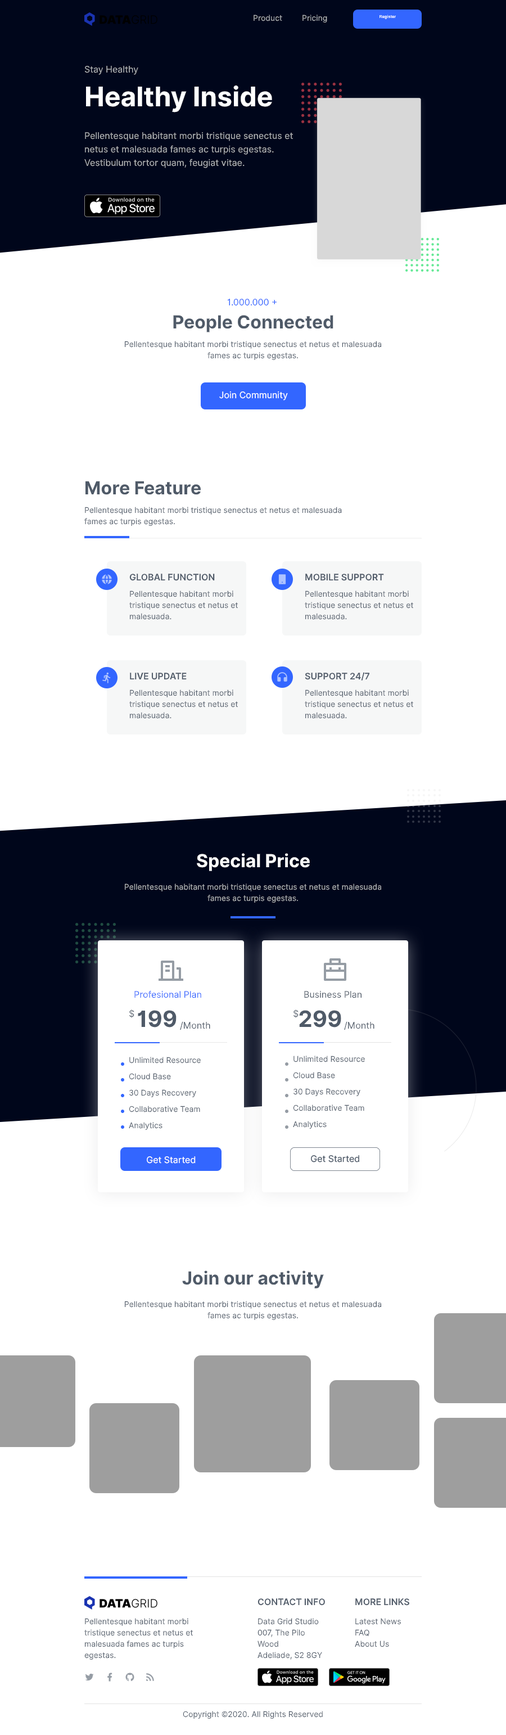
<style>
.page{position:relative;width:506px;height:1735px;background:#ffffff}
.page>*{position:absolute;margin:0}
.t1{font:7.9px "Inter-Regular";color:#b8b9bb}
.t2{font:4.2px "Arial-BoldMT";color:#ffffff}
.t3{font:9px "Inter-Regular";color:#b8b9bb}
.t4{font:27px "Inter-Bold";color:#ffffff}
.t5{font:9px/13.5px "Inter-Regular";color:#b8b9bb}
.t6{font:9px "Inter-Regular";color:#3366ff}
.t7{font:18px "Inter-Bold";color:#4f5a68}
.t8{font:7.9px/11.2px "Inter-Regular";color:#4f5a68}
.t9{font:9px "Inter-Regular";color:#ffffff}
.t10{font:9px "Inter-SemiBold";color:#4f5a68;text-transform:uppercase}
.t11{font:18px "Inter-Bold";color:#ffffff}
.t12{font:7.9px/11.2px "Inter-Regular";color:#b8b9bb}
.t13{font:9px "Inter-Regular";color:#4f5a68}
.t14{font:22.5px "Inter-Bold";color:#4f5a68}
.t15{font:7.9px/16.3px "Inter-Regular";color:#4f5a68}
.t16{font:7.9px "Inter-Regular";color:#4f5a68}
</style>
<div class="page">
<p class="t1" style="left:254px;top:15px;width:28px;height:6px">Product</p>
<p class="t1" style="left:303px;top:15px;width:24px;height:8px">Pricing</p>
<p class="t2" style="left:379px;top:15px;width:17px;height:4px">Register</p>
<p class="t3" style="left:84px;top:66px;width:54px;height:9px">Stay Healthy</p>
<p class="t4" style="left:86px;top:86px;width:186px;height:26px">Healthy Inside</p>
<p class="t5" style="left:84px;top:132px;width:209px;height:36px">Pellentesque habitant morbi tristique senectus et netus et malesuada fames ac turpis egestas. Vestibulum tortor quam, feugiat vitae.</p>
<p class="t6" style="left:227px;top:299px;width:50px;height:7px">1.000.000 +</p>
<p class="t7" style="left:173px;top:315px;width:161px;height:17px">People Connected</p>
<p class="t8" style="left:125px;top:341px;width:257px;height:20px;text-align:center">Pellentesque habitant morbi tristique senectus et netus et malesuada fames ac turpis egestas.</p>
<p class="t9" style="left:219px;top:391px;width:69px;height:9px">Join Community</p>
<p class="t7" style="left:86px;top:481px;width:115px;height:14px">More Feature</p>
<p class="t8" style="left:84px;top:507px;width:258px;height:19px">Pellentesque habitant morbi tristique senectus et netus et malesuada fames ac turpis egestas.</p>
<p class="t10" style="left:129px;top:574px;width:86px;height:7px">Global Function</p>
<p class="t10" style="left:305px;top:574px;width:79px;height:7px">Mobile Support</p>
<p class="t8" style="left:129px;top:591px;width:109px;height:29px">Pellentesque habitant morbi tristique senectus et netus et malesuada.</p>
<p class="t8" style="left:305px;top:591px;width:108px;height:29px">Pellentesque habitant morbi tristique senectus et netus et malesuada.</p>
<p class="t10" style="left:130px;top:673px;width:57px;height:7px">Live Update</p>
<p class="t10" style="left:305px;top:672px;width:65px;height:9px">Support 24/7</p>
<p class="t8" style="left:129px;top:690px;width:109px;height:29px">Pellentesque habitant morbi tristique senectus et netus et malesuada.</p>
<p class="t8" style="left:305px;top:690px;width:108px;height:29px">Pellentesque habitant morbi tristique senectus et netus et malesuada.</p>
<p class="t11" style="left:197px;top:853px;width:113px;height:18px">Special Price</p>
<p class="t12" style="left:125px;top:884px;width:257px;height:19px;text-align:center">Pellentesque habitant morbi tristique senectus et netus et malesuada fames ac turpis egestas.</p>
<p class="t6" style="left:134px;top:991px;width:67px;height:7px">Profesional Plan</p>
<p class="t13" style="left:304px;top:991px;width:58px;height:7px">Business Plan</p>
<p class="t13" style="left:129px;top:1009px;width:5px;height:9px">$</p>
<p class="t14" style="left:138px;top:1010px;width:39px;height:18px">199</p>
<p class="t13" style="left:293px;top:1009px;width:6px;height:9px">$</p>
<p class="t14" style="left:299px;top:1010px;width:42px;height:18px">299</p>
<p class="t13" style="left:180px;top:1022px;width:30px;height:8px">/Month</p>
<p class="t13" style="left:344px;top:1022px;width:31px;height:8px">/Month</p>
<p class="t15" style="left:129px;top:1057px;width:72px;height:73px">Unlimited Resource<br>Cloud Base<br>30 Days Recovery<br>Collaborative Team<br>Analytics</p>
<p class="t15" style="left:293px;top:1056px;width:72px;height:73px">Unlimited Resource<br>Cloud Base<br>30 Days Recovery<br>Collaborative Team<br>Analytics</p>
<p class="t9" style="left:147px;top:1156px;width:49px;height:8px">Get Started</p>
<p class="t13" style="left:311px;top:1155px;width:48px;height:8px">Get Started</p>
<p class="t7" style="left:182px;top:1271px;width:142px;height:18px">Join our activity</p>
<p class="t8" style="left:125px;top:1301px;width:257px;height:20px;text-align:center">Pellentesque habitant morbi tristique senectus et netus et malesuada fames ac turpis egestas.</p>
<p class="t10" style="left:258px;top:1599px;width:67px;height:7px">Contact Info</p>
<p class="t10" style="left:356px;top:1599px;width:54px;height:7px">More Links</p>
<p class="t8" style="left:84px;top:1618px;width:109px;height:42px">Pellentesque habitant morbi tristique senectus et netus et malesuada fames ac turpis egestas.</p>
<p class="t8" style="left:258px;top:1618px;width:64px;height:42px">Data Grid Studio<br>007, The Pilo Wood<br>Adeliade, S2 8GY</p>
<p class="t8" style="left:355px;top:1618px;width:46px;height:30px">Latest News<br>FAQ<br>About Us</p>
<p class="t16" style="left:183px;top:1711px;width:140px;height:9px">Copyright ©2020. All Rights Reserved</p>
</div>
